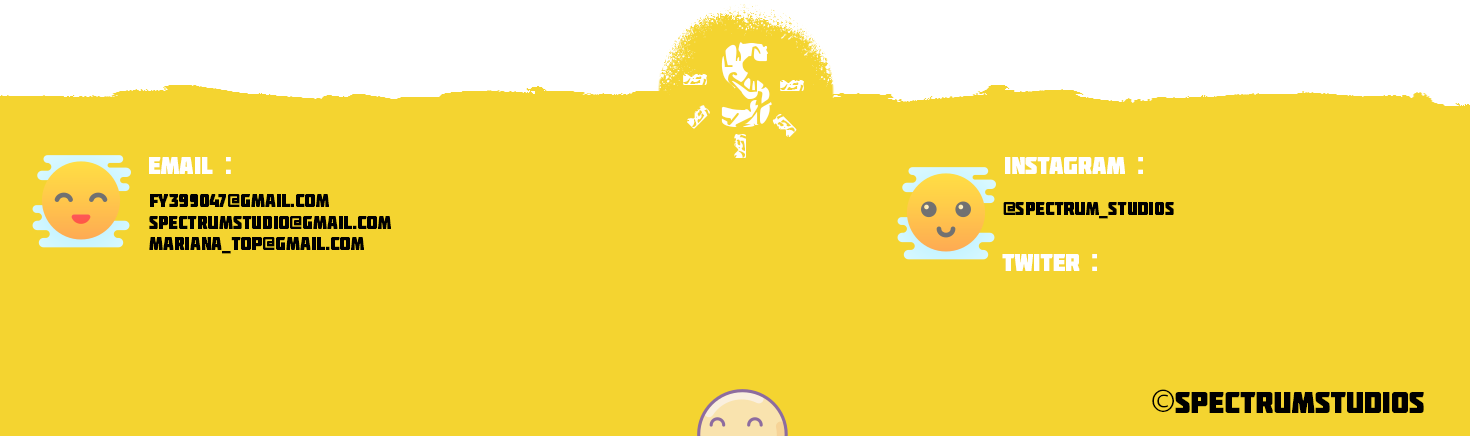
<style>
.page{position:relative;width:1470px;height:436px;background:#f4d430}
.page>*{position:absolute;margin:0}
.t1{font:147.5px "Pollock3CTT-Regular";color:#ffffff}
.t2{font:100px "Pollock3CTT-Regular";color:#ffffff}
.t3{font:100.3px "Pollock3CTT-Regular";color:#ffffff}
.t4{font:24px "Molot";color:#ffffff}
.t5{font:18px "Molot";color:#000000}
.t6{font:30px "Molot";color:#000000}
.t7{font:36px "MyriadPro-Regular";color:#000000}
</style>
<div class="page">
<p class="t1" style="left:721px;top:42px;width:51px;height:85px">s</p>
<p class="t2" style="left:683px;top:73px;width:24px;height:12px">-</p>
<p class="t2" style="left:780px;top:79px;width:24px;height:12px">-</p>
<p class="t3" style="left:687px;top:105px;width:23px;height:24px;rotate:-45deg">-</p>
<p class="t2" style="left:772px;top:114px;width:25px;height:23px;rotate:-135deg">-</p>
<p class="t2" style="left:734px;top:134px;width:12px;height:24px;rotate:-90deg">-</p>
<p class="t4" style="left:149px;top:157px;width:82px;height:17px">Email :</p>
<p class="t4" style="left:1005px;top:157px;width:138px;height:17px">instagram :</p>
<p class="t5" style="left:149px;top:194px;width:242px;height:60px">fy399047@gmail.com<br>spectrumstudio@gmail.com<br>Mariana_top@gmail.com</p>
<p class="t5" style="left:1003px;top:202px;width:171px;height:17px">@spectrum_studios</p>
<p class="t4" style="left:1002px;top:254px;width:95px;height:17px">twiter :</p>
<p class="t6" style="left:1152px;top:389px;width:272px;height:24px"><span class="t7">©</span>spectrumstudios</p>
</div>
